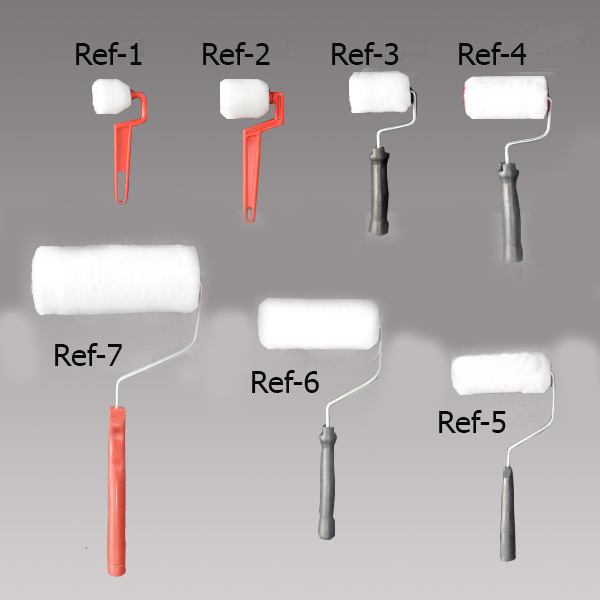
<style>
.page{position:relative;width:600px;height:600px}
.page>*{position:absolute;margin:0}
.t1{font:30px "Tahoma";color:#070707}
</style>
<div class="page">
<p class="t1" style="left:76px;top:42px;width:66px;height:23px">Ref-1</p>
<p class="t1" style="left:203px;top:42px;width:67px;height:23px">Ref-2</p>
<p class="t1" style="left:332px;top:42px;width:67px;height:23px">Ref-3</p>
<p class="t1" style="left:459px;top:42px;width:68px;height:23px">Ref-4</p>
<p class="t1" style="left:55px;top:343px;width:67px;height:23px">Ref-7</p>
<p class="t1" style="left:252px;top:370px;width:67px;height:23px">Ref-6</p>
<p class="t1" style="left:439px;top:410px;width:67px;height:23px">Ref-5</p>
</div>
